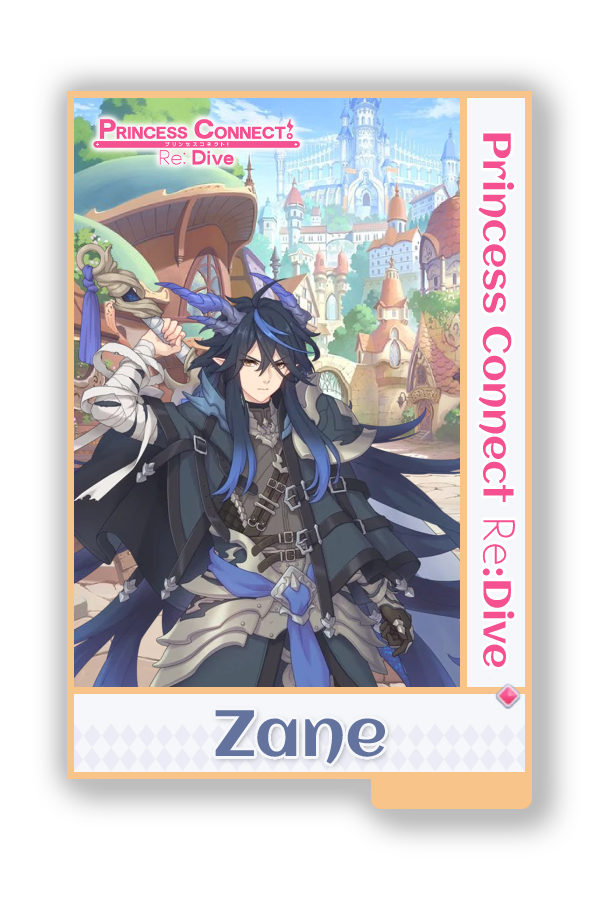
<style>
.page{position:relative;width:600px;height:900px;background:#ffffff}
.page>*{position:absolute;margin:0}
.t1{font:39px "Aclonica-Regular";color:#f55191}
.t2{font:39px "AaarghNormal";color:#f55191}
.t3{font:65px "Aclonica-Regular";color:#64739d}
</style>
<div class="page">
<p class="t1" style="left:478px;top:133px;width:38px;height:534px;rotate:90deg">Princess Connect <span class="t2">Re</span>:Dive</p>
<p class="t3" style="left:215px;top:710px;width:171px;height:54px">Zane</p>
</div>
